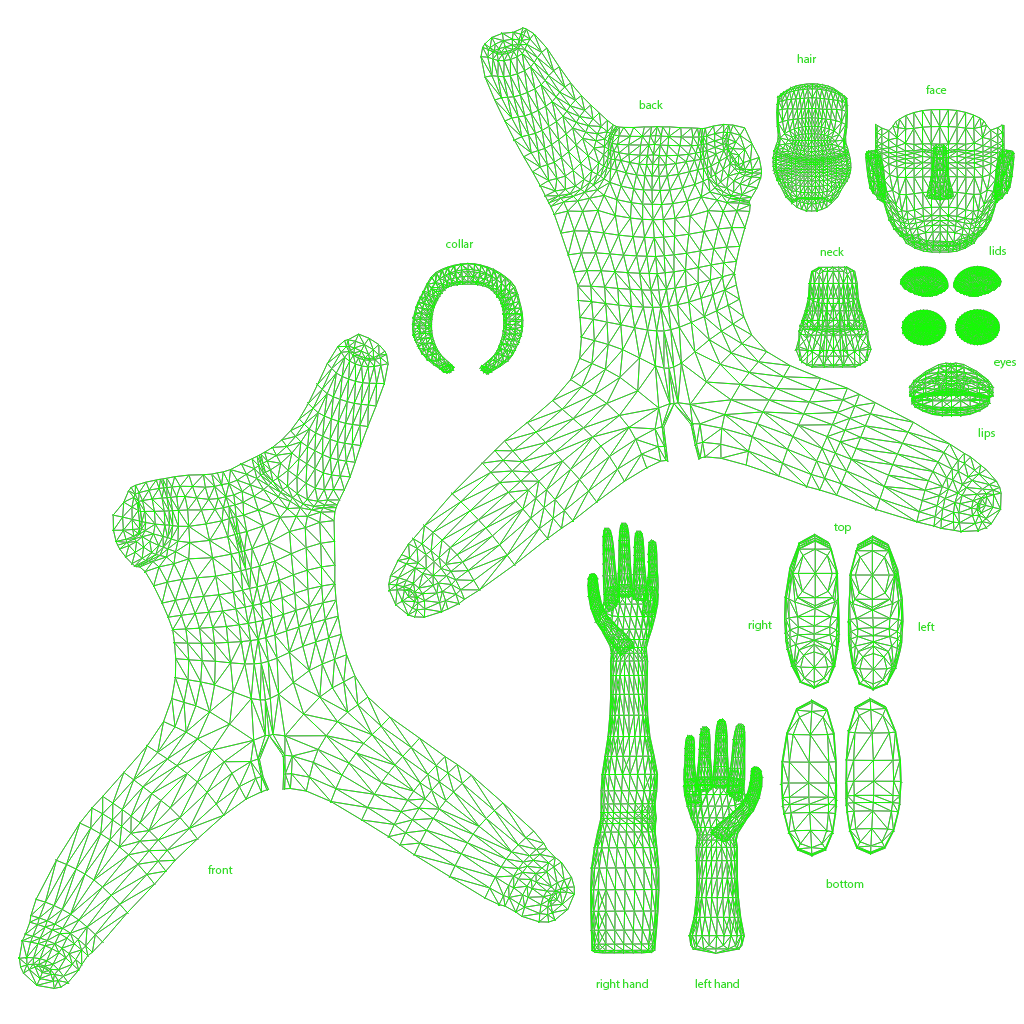
<style>
.page{position:relative;width:1024px;height:1024px;background:#ffffff}
.page>*{position:absolute;margin:0}
.t1{font:12px "MyriadPro-Regular";color:#36dd29}
</style>
<div class="page">
<p class="t1" style="left:797px;top:54px;width:20px;height:9px">hair</p>
<p class="t1" style="left:926px;top:85px;width:21px;height:9px">face</p>
<p class="t1" style="left:639px;top:100px;width:24px;height:9px">back</p>
<p class="t1" style="left:446px;top:239px;width:28px;height:9px">collar</p>
<p class="t1" style="left:989px;top:246px;width:17px;height:9px">lids</p>
<p class="t1" style="left:820px;top:247px;width:24px;height:9px">neck</p>
<p class="t1" style="left:994px;top:360px;width:22px;height:9px">eyes</p>
<p class="t1" style="left:978px;top:428px;width:17px;height:12px">lips</p>
<p class="t1" style="left:834px;top:523px;width:17px;height:11px">top</p>
<p class="t1" style="left:748px;top:620px;width:24px;height:11px">right</p>
<p class="t1" style="left:918px;top:622px;width:17px;height:9px">left</p>
<p class="t1" style="left:208px;top:865px;width:25px;height:9px">front</p>
<p class="t1" style="left:826px;top:879px;width:38px;height:9px">bottom</p>
<p class="t1" style="left:596px;top:979px;width:52px;height:11px">right hand</p>
<p class="t1" style="left:695px;top:979px;width:44px;height:9px">left hand</p>
</div>
